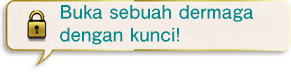
<style>
.page{position:relative;width:291px;height:72px}
.page>*{position:absolute;margin:0}
.t1{font:19px "FutoGoB101Pr5-Bold";color:#008c91}
</style>
<div class="page">
<p class="t1" style="left:60px;top:5px;width:193px;height:40px">Buka sebuah dermaga<br>dengan kunci!</p>
</div>
